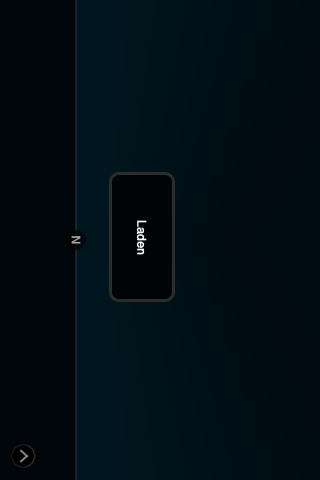
<style>
.page{position:relative;width:320px;height:480px;background:#00060a}
.page>*{position:absolute;margin:0}
.t1{font:12px "Helvetica";color:#ffffff;font-weight:bold}
</style>
<div class="page">
<p class="t1" style="left:136px;top:220px;width:11px;height:35px;rotate:90deg">Laden</p>
</div>
